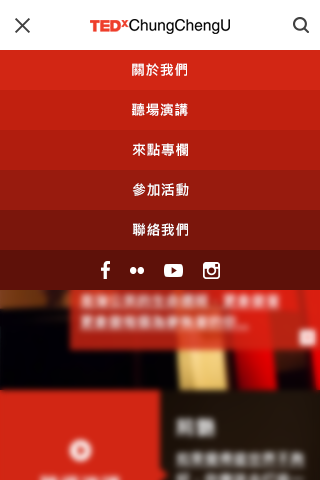
<style>
.page{position:relative;width:320px;height:480px}
.page>*{position:absolute;margin:0}
.t1{font:14px "MicrosoftJhengHeiBold";letter-spacing:0.03em;color:#ffffff}
</style>
<div class="page">
<p class="t1" style="left:132px;top:63px;width:55px;height:13px">關於我們</p>
<p class="t1" style="left:132px;top:103px;width:56px;height:13px">聽場演講</p>
<p class="t1" style="left:132px;top:143px;width:56px;height:13px">來點專欄</p>
<p class="t1" style="left:132px;top:183px;width:57px;height:13px">參加活動</p>
<p class="t1" style="left:132px;top:223px;width:56px;height:13px">聯絡我們</p>
</div>
